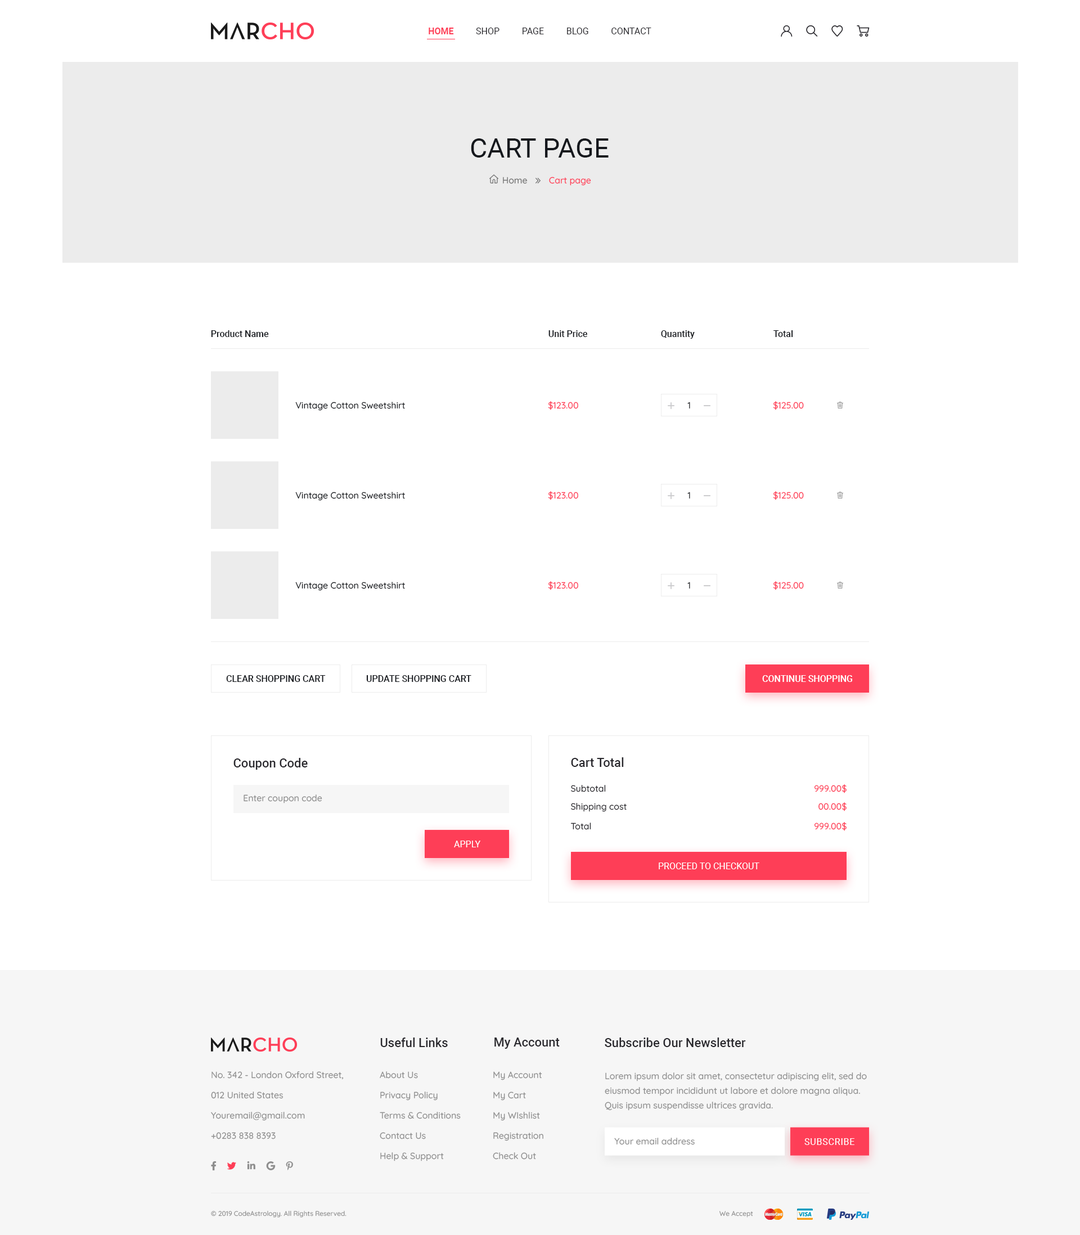
<style>
.page{position:relative;width:1080px;height:1235px;background:#ffffff}
.page>*{position:absolute;margin:0}
.t1{font:9px "Roboto-Regular";color:#29282d}
.t2{font:9px "Roboto-Bold";color:#fe3e57}
.t3{font:27px "Roboto-Regular";color:#15181d}
.t4{font:9px "Quicksand-Medium";color:#727272}
.t5{font:9px "Quicksand-Medium";color:#fe3e57}
.t6{font:9px "Roboto-Medium";color:#15181d}
.t7{font:9px "Quicksand-Medium";color:#15181d}
.t8{font:9px "Quicksand-Medium"}
.t9{font:9px "Roboto-Medium";color:#ffffff}
.t10{font:12.4px "Roboto-Medium";color:#29282d}
.t11{font:9px "Quicksand-Medium";color:#29282d}
.t12{font:9px "Quicksand-Medium";color:#8d8d8d}
.t13{font:9px "Roboto-Regular";color:#ffffff}
.t14{font:9px/20.2px "Quicksand-Medium";color:#8d8d8d}
.t15{font:9px/14.6px "Quicksand-Medium";color:#8d8d8d}
.t16{font:9px "Roboto-Regular";letter-spacing:0.05em;color:#ffffff;text-transform:uppercase}
.t17{font:6.8px "Quicksand-Medium";color:#8d8d8d}
</style>
<div class="page">
<p class="t1" style="left:429px;top:28px;width:222px;height:6px"><span class="t2">HOME          </span>SHOP          PAGE          BLOG          CONTACT</p>
<p class="t3" style="left:471px;top:138px;width:138px;height:20px">CART PAGE</p>
<p class="t4" style="left:503px;top:177px;width:24px;height:7px">Home</p>
<p class="t5" style="left:549px;top:177px;width:42px;height:9px">Cart page</p>
<p class="t6" style="left:211px;top:330px;width:58px;height:7px">Product Name</p>
<p class="t6" style="left:548px;top:330px;width:39px;height:7px">Unit Price</p>
<p class="t6" style="left:661px;top:330px;width:34px;height:9px">Quantity</p>
<p class="t6" style="left:773px;top:330px;width:20px;height:7px">Total</p>
<p class="t7" style="left:295px;top:402px;width:110px;height:9px">Vintage Cotton Sweetshirt</p>
<p class="t5" style="left:548px;top:401px;width:30px;height:9px">$123.00</p>
<p class="t8" style="left:687px;top:402px;width:3px;height:7px">1</p>
<p class="t5" style="left:773px;top:401px;width:31px;height:9px">$125.00</p>
<p class="t7" style="left:295px;top:492px;width:110px;height:9px">Vintage Cotton Sweetshirt</p>
<p class="t5" style="left:548px;top:491px;width:30px;height:9px">$123.00</p>
<p class="t8" style="left:687px;top:492px;width:3px;height:7px">1</p>
<p class="t5" style="left:773px;top:491px;width:31px;height:9px">$125.00</p>
<p class="t7" style="left:295px;top:582px;width:110px;height:9px">Vintage Cotton Sweetshirt</p>
<p class="t5" style="left:548px;top:581px;width:30px;height:9px">$123.00</p>
<p class="t8" style="left:687px;top:582px;width:3px;height:7px">1</p>
<p class="t5" style="left:773px;top:581px;width:31px;height:9px">$125.00</p>
<p class="t6" style="left:226px;top:675px;width:100px;height:7px">CLEAR SHOPPING CART</p>
<p class="t6" style="left:366px;top:675px;width:105px;height:7px">UPDATE SHOPPING CART</p>
<p class="t9" style="left:762px;top:675px;width:90px;height:7px">CONTINUE SHOPPING</p>
<p class="t10" style="left:233px;top:758px;width:75px;height:12px">Coupon Code</p>
<p class="t10" style="left:571px;top:757px;width:53px;height:10px">Cart Total</p>
<p class="t11" style="left:571px;top:785px;width:35px;height:7px">Subtotal</p>
<p class="t5" style="left:814px;top:784px;width:33px;height:9px">999.00$</p>
<p class="t12" style="left:244px;top:794px;width:78px;height:9px">Enter coupon code</p>
<p class="t11" style="left:571px;top:803px;width:56px;height:9px">Shipping cost</p>
<p class="t5" style="left:818px;top:802px;width:29px;height:9px">00.00$</p>
<p class="t5" style="left:814px;top:822px;width:33px;height:9px">999.00$</p>
<p class="t11" style="left:570px;top:822px;width:21px;height:8px">Total</p>
<p class="t13" style="left:454px;top:840px;width:26px;height:7px">APPLY</p>
<p class="t13" style="left:659px;top:862px;width:100px;height:7px">PROCEED TO CHECKOUT</p>
<p class="t10" style="left:380px;top:1037px;width:68px;height:10px">Useful Links</p>
<p class="t10" style="left:494px;top:1037px;width:66px;height:11px">My Account</p>
<p class="t10" style="left:605px;top:1037px;width:141px;height:10px">Subscribe Our Newsletter</p>
<p class="t14" style="left:211px;top:1071px;width:133px;height:68px">No. 342 - London Oxford Street,<br>012 United States<br>Youremail@gmail.com<br>+0283 838 8393</p>
<p class="t14" style="left:380px;top:1071px;width:81px;height:90px">About Us<br>Privacy Policy<br>Terms &amp; Conditions<br>Contact Us<br>Help &amp; Support</p>
<p class="t14" style="left:493px;top:1071px;width:50px;height:88px">My Account<br>My Cart<br>My WIshlist<br>Registration<br>Check Out</p>
<p class="t15" style="left:605px;top:1072px;width:262px;height:38px">Lorem ipsum dolor sit amet, consectetur adipiscing elit, sed do eiusmod tempor incididunt ut labore et dolore magna aliqua. Quis ipsum suspendisse ultrices gravida.</p>
<p class="t12" style="left:614px;top:1137px;width:81px;height:8px">Your email address</p>
<p class="t16" style="left:804px;top:1138px;width:50px;height:7px">Subscribe</p>
<p class="t17" style="left:211px;top:1210px;width:135px;height:7px">© 2019 CodeAstrology. All Rights Reserved.</p>
<p class="t17" style="left:719px;top:1210px;width:34px;height:7px">We Accept</p>
</div>
